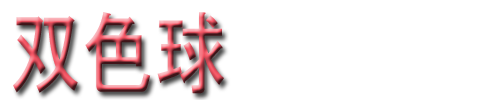
<style>
.page{position:relative;width:500px;height:100px;background:#ffffff}
.page>*{position:absolute;margin:0}
.t1{font:92px "MS-Gothic";scale:0.79 1}
</style>
<div class="page">
<p class="t1" style="left:13px;top:12px;width:211px;height:82px">双色球</p>
</div>
